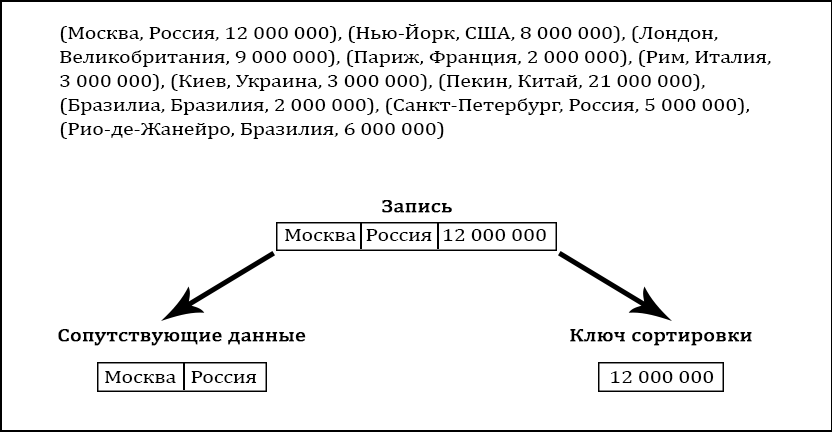
<style>
.page{position:relative;width:832px;height:432px;background:#ffffff}
.page>*{position:absolute;margin:0}
.t1{font:18px/24px "Cambria";color:#000000;scale:1.2 1}
.t2{font:18px "Cambria";color:#000000;font-weight:bold;scale:1.2 1}
.t3{font:18px "Cambria";color:#000000;scale:1.2 1}
.t4{font:17.9px "Cambria";color:#000000;font-weight:bold;scale:1.21 1}
</style>
<div class="page">
<p class="t1" style="left:60px;top:24px;width:711px;height:115px">(Москва, Россия, 12 000 000), (Нью-Йорк, США, 8 000 000), (Лондон,<br>Великобритания, 9 000 000), (Париж, Франция, 2 000 000), (Рим, Италия,<br>3 000 000), (Киев, Украина, 3 000 000), (Пекин, Китай, 21 000 000),<br>(Бразилиа, Бразилия, 2 000 000), (Санкт-Петербург, Россия, 5 000 000),<br>(Рио-де-Жанейро, Бразилия, 6 000 000)</p>
<p class="t2" style="left:382px;top:200px;width:70px;height:13px">Запись</p>
<p class="t3" style="left:285px;top:229px;width:261px;height:12px">Москва  Россия  12 000 000</p>
<p class="t2" style="left:58px;top:329px;width:248px;height:17px">Сопутствующие данные</p>
<p class="t4" style="left:570px;top:329px;width:182px;height:17px">Ключ сортировки</p>
<p class="t3" style="left:105px;top:371px;width:152px;height:12px">Москва   Россия</p>
<p class="t3" style="left:611px;top:371px;width:103px;height:12px">12 000 000</p>
</div>
